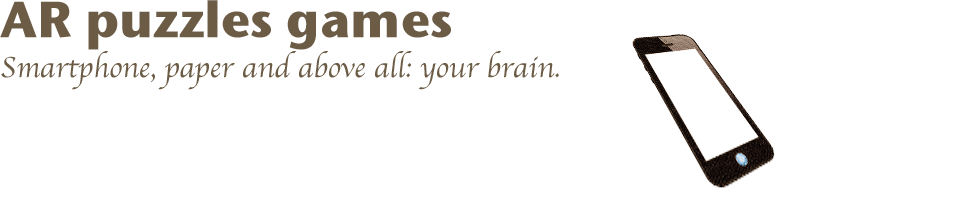
<style>
.page{position:relative;width:980px;height:200px;background:#ffffff}
.page>*{position:absolute;margin:0}
.t1{font:30px/40px "Apple-Chancery";color:#6c5c46}
.t2{font:50px/40px "StoneSansITC-Bold";color:#6c5c46}
</style>
<div class="page">
<p class="t1" style="left:0px;top:0px;width:559px;height:90px"><span class="t2">AR puzzles games<br></span>Smartphone, paper and above all: your brain.</p>
</div>
